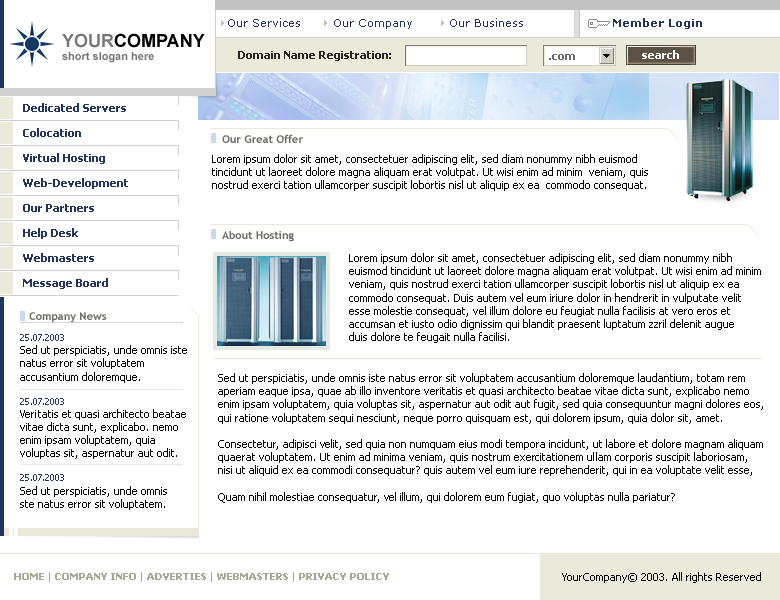
<style>
.page{position:relative;width:780px;height:600px;background:#ffffff}
.page>*{position:absolute;margin:0}
.t1{font:11px "Verdana";color:#22355c}
.t2{font:11px "Verdana-Bold";color:#22355c}
.t3{font:11px "Arial-BoldMT";color:#747474}
.t4{font:18px "Arial-BoldMT";color:#777777}
.t5{font:18px "Arial-BoldMT";color:#000000}
.t6{font:11px "Tahoma-Bold";color:#262626}
.t7{font:11px "Tahoma-Bold";color:#676767}
.t8{font:11px "Tahoma-Bold";color:#ffffff}
.t9{font:11px/25px "Tahoma-Bold";color:#22355c}
.t10{font:11px "TrebuchetMS-Bold";color:#6e6e68}
.t11{font:11px "Tahoma";color:#000000}
.t12{font:9px "Tahoma";color:#22355c}
.t13{font:10px "Tahoma-Bold";color:#a8a794}
.t14{font:10px "Tahoma";color:#a8a794}
</style>
<div class="page">
<p class="t1" style="left:228px;top:18px;width:474px;height:11px">Our Services        Our Company         Our Business                      <span class="t2">Member Login</span></p>
<p class="t3" style="left:62px;top:33px;width:143px;height:30px"><span class="t4">YOUR</span><span class="t5">COMPANY<br></span>short slogan here</p>
<p class="t6" style="left:238px;top:51px;width:153px;height:10px">Domain Name Registration:</p>
<p class="t7" style="left:549px;top:54px;width:26px;height:6px">.com</p>
<p class="t8" style="left:642px;top:50px;width:37px;height:9px">search</p>
<p class="t9" style="left:23px;top:103px;width:105px;height:186px">Dedicated Servers<br>Colocation<br>Virtual Hosting<br>Web-Development<br>Our Partners<br>Help Desk<br>Webmasters<br>Message Board</p>
<p class="t10" style="left:222px;top:134px;width:82px;height:9px">Our Great Offer</p>
<p class="t11" style="left:212px;top:154px;width:436px;height:37px">Lorem ipsum dolor sit amet, consectetuer adipiscing elit, sed diam nonummy nibh euismod<br>tincidunt ut laoreet dolore magna aliquam erat volutpat. Ut wisi enim ad minim  veniam, quis<br>nostrud exerci tation ullamcorper suscipit lobortis nisl ut aliquip ex ea  commodo consequat.</p>
<p class="t10" style="left:222px;top:230px;width:72px;height:12px">About Hosting</p>
<p class="t11" style="left:349px;top:253px;width:412px;height:90px">Lorem ipsum dolor sit amet, consectetuer adipiscing elit, sed diam nonummy nibh <br>euismod tincidunt ut laoreet dolore magna aliquam erat volutpat. Ut wisi enim ad minim <br>veniam, quis nostrud exerci tation ullamcorper suscipit lobortis nisl ut aliquip ex ea <br>commodo consequat. Duis autem vel eum iriure dolor in hendrerit in vulputate velit <br>esse molestie consequat, vel illum dolore eu feugiat nulla facilisis at vero eros et <br>accumsan et iusto odio dignissim qui blandit praesent luptatum zzril delenit augue <br>duis dolore te feugait nulla facilisi.</p>
<p class="t10" style="left:29px;top:312px;width:78px;height:11px">Company News</p>
<p class="t11" style="left:20px;top:334px;width:167px;height:176px"><span class="t12">25.07.2003<br></span>Sed ut perspiciatis, unde omnis iste <br>natus error sit voluptatem <br>accusantium doloremque.<br><br><span class="t12">25.07.2003<br></span>Veritatis et quasi architecto beatae <br>vitae dicta sunt, explicabo. nemo <br>enim ipsam voluptatem, quia <br>voluptas sit, aspernatur aut odit.<br><br><span class="t12">25.07.2003<br></span>Sed ut perspiciatis, unde omnis <br>ste natus error sit voluptatem.</p>
<p class="t11" style="left:218px;top:373px;width:545px;height:130px">Sed ut perspiciatis, unde omnis iste natus error sit voluptatem accusantium doloremque laudantium, totam rem <br>aperiam eaque ipsa, quae ab illo inventore veritatis et quasi architecto beatae vitae dicta sunt, explicabo nemo <br>enim ipsam voluptatem, quia voluptas sit, aspernatur aut odit aut fugit, sed quia consequuntur magni dolores eos, <br>qui ratione voluptatem sequi nesciunt, neque porro quisquam est, qui dolorem ipsum, quia dolor sit, amet.<br><br>Consectetur, adipisci velit, sed quia non numquam eius modi tempora incidunt, ut labore et dolore magnam aliquam <br>quaerat voluptatem. Ut enim ad minima veniam, quis nostrum exercitationem ullam corporis suscipit laboriosam, <br>nisi ut aliquid ex ea commodi consequatur? quis autem vel eum iure reprehenderit, qui in ea voluptate velit esse, <br><br>Quam nihil molestiae consequatur, vel illum, qui dolorem eum fugiat, quo voluptas nulla pariatur?</p>
<p class="t13" style="left:14px;top:572px;width:375px;height:10px">HOME <span class="t14">|</span> COMPANY INFO <span class="t14">|</span> ADVERTIES <span class="t14">|</span> WEBMASTERS <span class="t14">| </span>PRIVACY POLICY</p>
<p class="t11" style="left:562px;top:572px;width:199px;height:11px">YourCompany© 2003. All rights Reserved</p>
</div>
